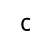
<style>
.page{position:relative;width:53px;height:41px;background:#ffffff}
.page>*{position:absolute;margin:0}
.t1{font:23.7px "DroidSans";color:#000000}
</style>
<div class="page">
<p class="t1" style="left:21px;top:17px;width:10px;height:14px">c</p>
</div>
